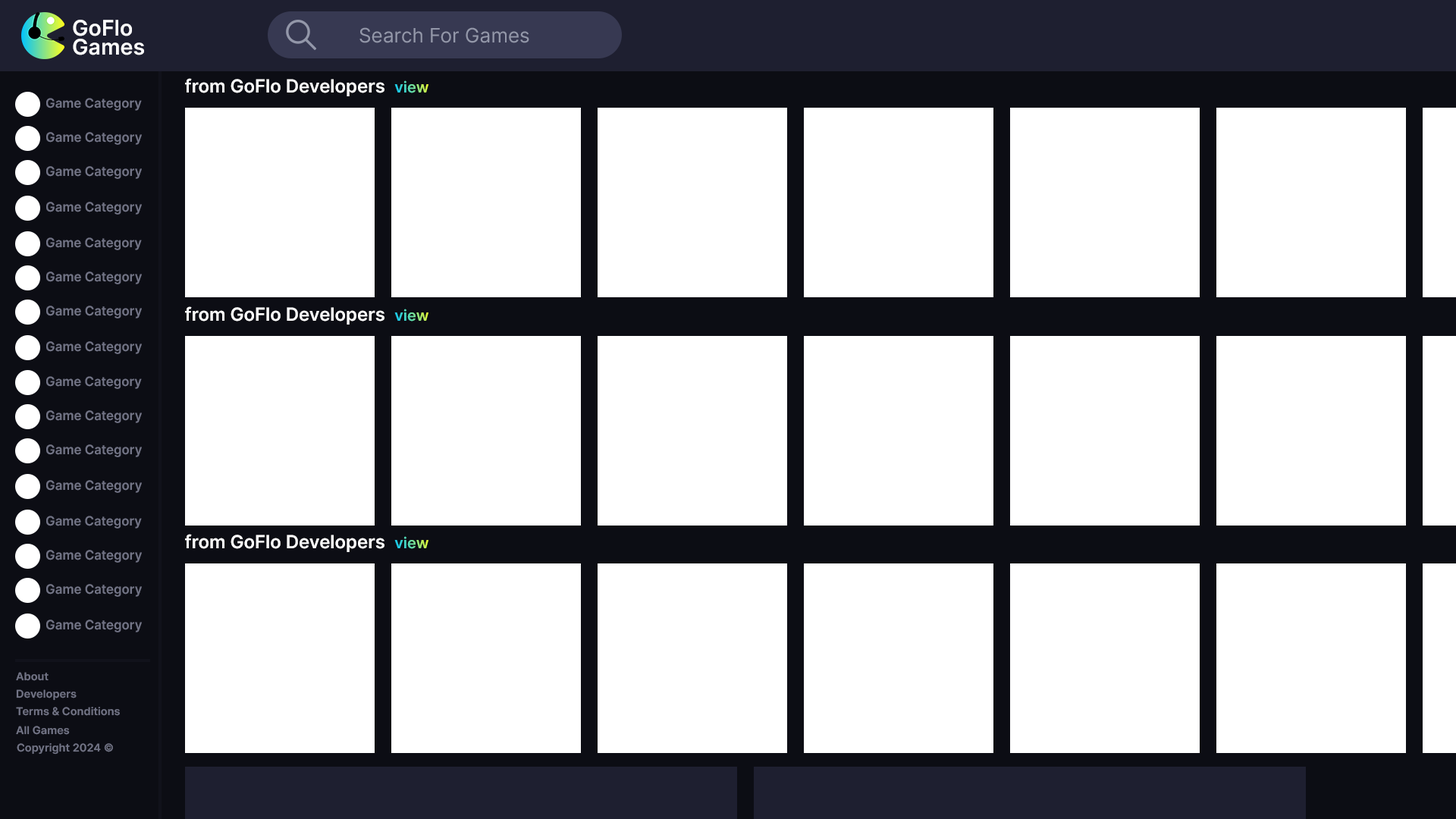
<style>
.page{position:relative;width:1456px;height:819px;background:#ffffff}
.page>*{position:absolute;margin:0}
.t1{font:21.7px/19.1px "Inter-SemiBold";color:#fefeff}
.t2{font:19.9px "Inter-Regular";color:#9397a9}
.t3{font:18.2px "Inter-SemiBold";color:#ffffff}
.t4{font:15.2px "Inter-SemiBold"}
.t5{font:12.8px "Inter-SemiBold";color:#727486}
.t6{font:13px "Inter-SemiBold";color:#727486}
.t7{font:10.9px "Inter-SemiBold";color:#727486}
</style>
<div class="page">
<p class="t1" style="left:73px;top:20px;width:71px;height:35px">GoFlo<br>Games</p>
<p class="t2" style="left:359px;top:27px;width:170px;height:16px">Search For Games</p>
<p class="t3" style="left:185px;top:78px;width:199px;height:18px">from GoFlo Developers</p>
<p class="t4" style="left:394px;top:80px;width:34px;height:13px">view</p>
<p class="t5" style="left:46px;top:98px;width:96px;height:13px">Game Category</p>
<p class="t6" style="left:46px;top:132px;width:96px;height:13px">Game Category</p>
<p class="t6" style="left:46px;top:166px;width:96px;height:13px">Game Category</p>
<p class="t6" style="left:46px;top:202px;width:96px;height:13px">Game Category</p>
<p class="t5" style="left:46px;top:237px;width:96px;height:13px">Game Category</p>
<p class="t6" style="left:46px;top:271px;width:96px;height:13px">Game Category</p>
<p class="t6" style="left:46px;top:306px;width:96px;height:12px">Game Category</p>
<p class="t3" style="left:185px;top:306px;width:199px;height:19px">from GoFlo Developers</p>
<p class="t4" style="left:394px;top:309px;width:34px;height:13px">view</p>
<p class="t6" style="left:46px;top:341px;width:96px;height:13px">Game Category</p>
<p class="t5" style="left:46px;top:376px;width:96px;height:13px">Game Category</p>
<p class="t6" style="left:46px;top:410px;width:96px;height:13px">Game Category</p>
<p class="t6" style="left:46px;top:444px;width:96px;height:13px">Game Category</p>
<p class="t6" style="left:46px;top:480px;width:96px;height:13px">Game Category</p>
<p class="t5" style="left:46px;top:516px;width:96px;height:13px">Game Category</p>
<p class="t3" style="left:185px;top:534px;width:199px;height:18px">from GoFlo Developers</p>
<p class="t4" style="left:394px;top:536px;width:34px;height:13px">view</p>
<p class="t6" style="left:46px;top:550px;width:96px;height:13px">Game Category</p>
<p class="t6" style="left:46px;top:584px;width:96px;height:13px">Game Category</p>
<p class="t6" style="left:46px;top:620px;width:96px;height:12px">Game Category</p>
<p class="t7" style="left:16px;top:672px;width:33px;height:9px">About</p>
<p class="t7" style="left:16px;top:689px;width:61px;height:12px">Developers</p>
<p class="t7" style="left:16px;top:707px;width:104px;height:9px">Terms &amp; Conditions</p>
<p class="t7" style="left:16px;top:726px;width:54px;height:9px">All Games</p>
<p class="t7" style="left:17px;top:743px;width:96px;height:12px">Copyright 2024 ©</p>
</div>
